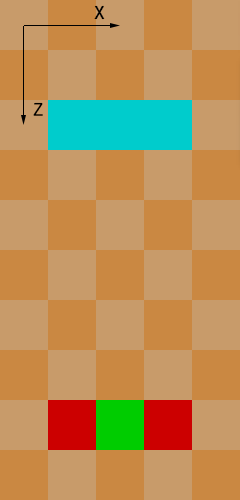
<style>
.page{position:relative;width:240px;height:500px;background:#c89b6a}
.page>*{position:absolute;margin:0}
.t1{font:24px "MS-Gothic";color:#000000}
</style>
<div class="page">
<p class="t1" style="left:94px;top:5px;width:11px;height:15px">x</p>
<p class="t1" style="left:33px;top:102px;width:10px;height:14px">z</p>
</div>
